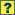
<style>
.page{position:relative;width:15px;height:15px;background:#fff326}
.page>*{position:absolute;margin:0}
.t1{font:14px "Arial-Black";color:#03368a}
</style>
<div class="page">
<p class="t1" style="left:4px;top:2px;width:8px;height:11px">?</p>
</div>
